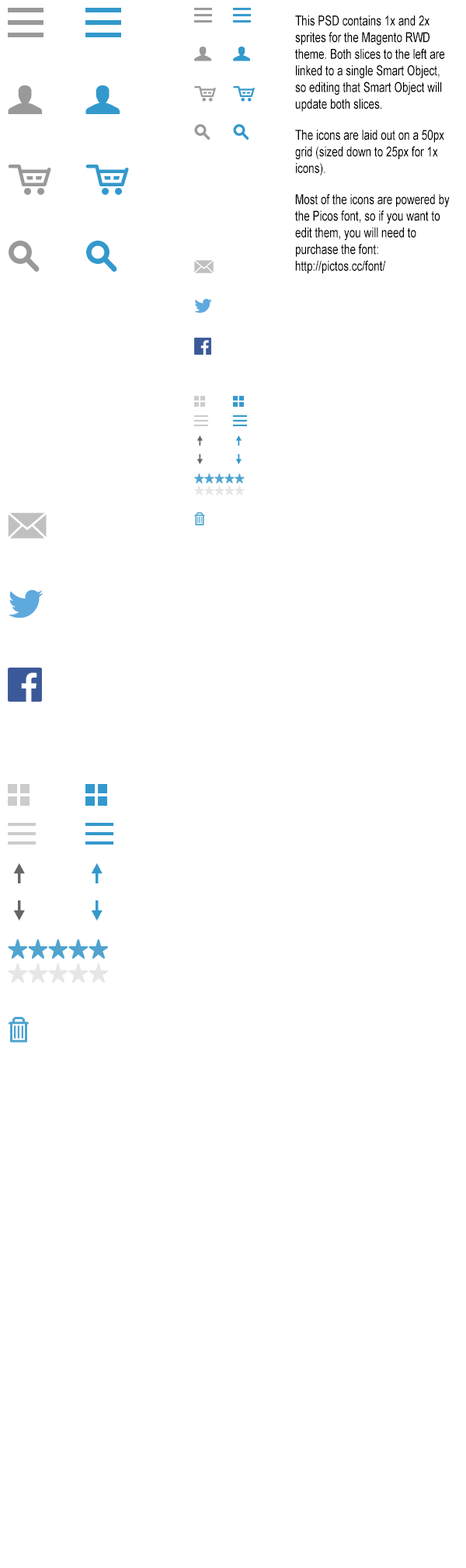
<style>
.page{position:relative;width:466px;height:1568px;background:#ffffff}
.page>*{position:absolute;margin:0}
.t1{font:13.9px "ArialMT";color:#000000;scale:0.76 1}
</style>
<div class="page">
<p class="t1" style="left:295px;top:15px;width:154px;height:259px">This PSD contains 1x and 2x sprites for the Magento RWD theme. Both slices to the left are linked to a single Smart Object, so editing that Smart Object will update both slices.<br>The icons are laid out on a 50px grid (sized down to 25px for 1x icons).<br>Most of the icons are powered by the Picos font, so if you want to edit them, you will need to purchase the font: <br>http://pictos.cc/font/</p>
</div>
